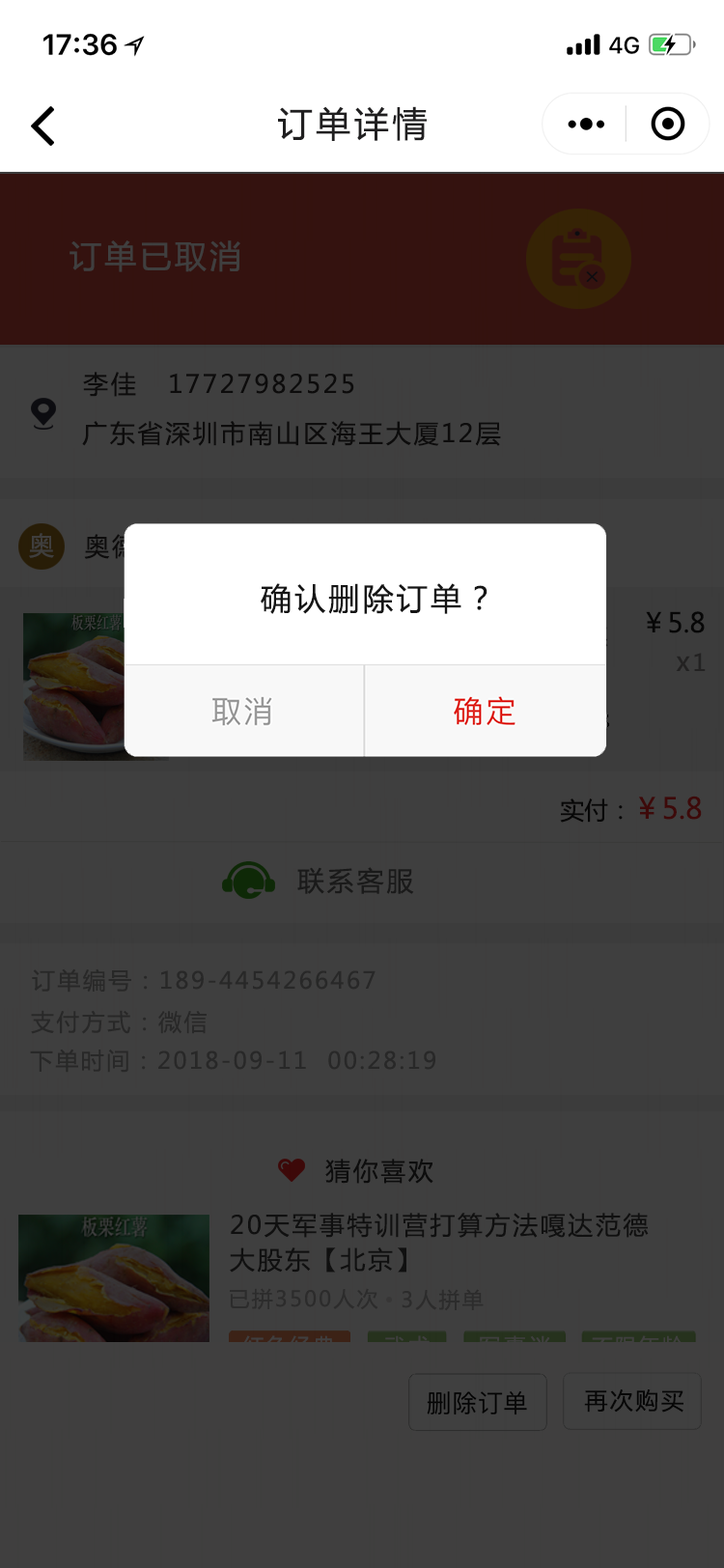
<style>
.page{position:relative;width:724px;height:1568px;background:#3f3f3f}
.page>*{position:absolute;margin:0}
.t1{font:34.8px "MicrosoftYaHei";letter-spacing:0.1em;color:#201f20}
.t2{font:31.9px "MicrosoftYaHei";letter-spacing:0.1em;color:#3f3f3f}
.t3{font:25.1px "MicrosoftYaHei";letter-spacing:0.1em;color:#0d0c0c}
.t4{font:25.1px "MicrosoftYaHei";letter-spacing:0.1em;color:#3f3e3d}
.t5{font:30.9px "MicrosoftYaHei";letter-spacing:0.1em;color:#151515}
.t6{font:27px "MicrosoftYaHei";color:#121111}
.t7{font:27px "MicrosoftYaHei";letter-spacing:0.1em;color:#232222}
.t8{font:23.2px "MicrosoftYaHei";letter-spacing:0.1em;color:#232222}
.t9{font:29px "MicrosoftYaHei"}
.t10{font:24.1px "MicrosoftYaHei"}
.t11{font:27px "MicrosoftYaHei";letter-spacing:0.1em;color:#1a1a1a}
.t12{font:23.2px "MicrosoftYaHei";letter-spacing:0.1em;color:#282828}
.t13{font:25.1px "MicrosoftYaHei";letter-spacing:0.1em;color:#0d0d0d}
.t14{font:25.1px/34.8px "MicrosoftYaHei";letter-spacing:0.1em;color:#101010}
.t15{font:21.2px "MicrosoftYaHei";letter-spacing:0.1em;color:#2c2c2c}
.t16{font:21.2px "MicrosoftYaHei";letter-spacing:0.1em;color:#403f3f}
.t17{font:21.2px "MicrosoftYaHei";letter-spacing:0.2em;color:#403f3f}
.t18{font:23.2px "MicrosoftYaHei";letter-spacing:0.1em;color:#111112}
</style>
<div class="page">
<p class="t1" style="left:278px;top:106px;width:149px;height:35px">订单详情</p>
<p class="t2" style="left:70px;top:240px;width:170px;height:32px">订单已取消</p>
<p class="t3" style="left:83px;top:372px;width:271px;height:25px">李佳   17727982525</p>
<p class="t3" style="left:82px;top:421px;width:419px;height:25px">广东省深圳市南山区海王大厦12层</p>
<p class="t4" style="left:29px;top:533px;width:25px;height:25px">奥</p>
<p class="t5" style="left:261px;top:583px;width:227px;height:31px">确认删除订单？</p>
<p class="t6" style="left:646px;top:611px;width:59px;height:22px">￥5.8</p>
<p class="t7" style="left:676px;top:653px;width:30px;height:18px">x<span class="t8">1</span></p>
<p class="t9" style="left:560px;top:796px;width:142px;height:27px"><span class="t10">实付：</span>￥5.8</p>
<p class="t11" style="left:297px;top:867px;width:117px;height:27px">联系客服</p>
<p class="t12" style="left:32px;top:968px;width:344px;height:25px">订单编号：189-4454266467</p>
<p class="t12" style="left:31px;top:1010px;width:176px;height:24px">支付方式：微信</p>
<p class="t12" style="left:30px;top:1049px;width:405px;height:24px">下单时间：2018-09-11  00:28:19</p>
<p class="t13" style="left:325px;top:1159px;width:109px;height:25px">猜你喜欢</p>
<p class="t14" style="left:230px;top:1213px;width:419px;height:60px">20天军事特训营打算方法嘎达范德<br>大股东【北京】</p>
<p class="t15" style="left:230px;top:1288px;width:148px;height:22px">已拼3500人次</p>
<p class="t15" style="left:402px;top:1289px;width:82px;height:22px">3人拼单</p>
<p class="t16" style="left:243px;top:1335px;width:91px;height:22px">红色经典</p>
<p class="t17" style="left:479px;top:1335px;width:72px;height:22px">军事迷</p>
<p class="t18" style="left:584px;top:1389px;width:100px;height:24px">再次购买</p>
</div>
